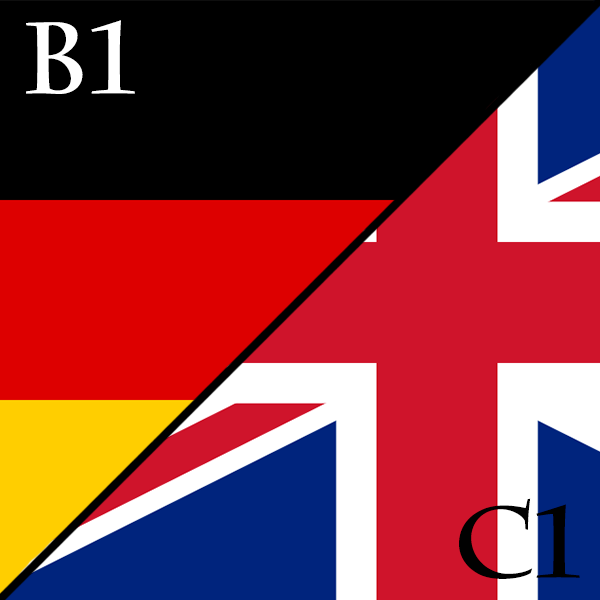
<style>
.page{position:relative;width:600px;height:600px;background:#000000}
.page>*{position:absolute;margin:0}
.t1{font:100px "CharlemagneStd-Bold";color:#ffffff}
.t2{font:100px "CharlemagneStd-Bold";color:#010101}
</style>
<div class="page">
<p class="t1" style="left:26px;top:20px;width:109px;height:74px">B1</p>
<p class="t2" style="left:459px;top:498px;width:121px;height:81px">C1</p>
</div>
